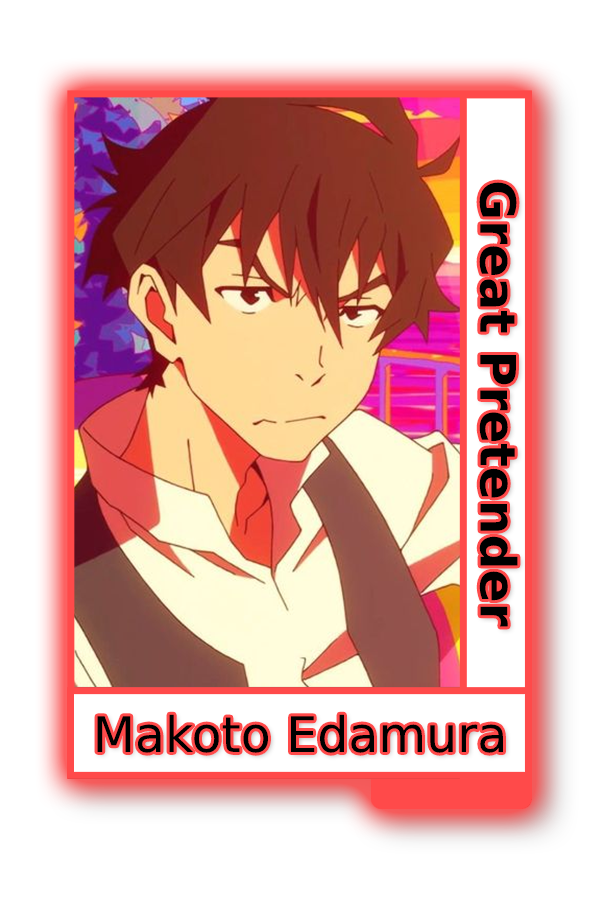
<style>
.page{position:relative;width:600px;height:900px;background:#ffffff}
.page>*{position:absolute;margin:0}
.t1{font:48.8px "MADETOMMY-Bold";color:#000000}
.t2{font:49px "CoolveticaRg-Regular";color:#000000}
</style>
<div class="page">
<p class="t1" style="left:479px;top:182px;width:39px;height:445px;rotate:90deg">Great Pretender</p>
<p class="t2" style="left:97px;top:714px;width:406px;height:39px">Makoto Edamura</p>
</div>
